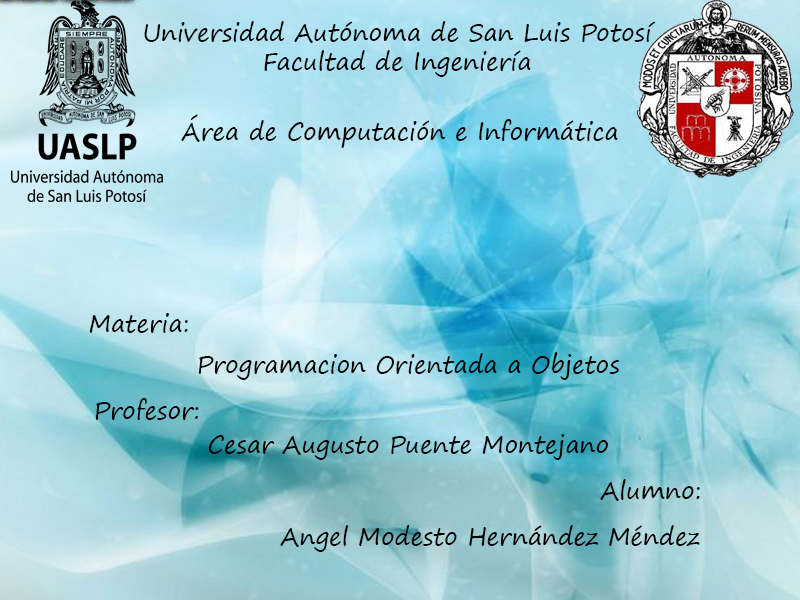
<style>
.page{position:relative;width:800px;height:600px}
.page>*{position:absolute;margin:0}
.t1{font:24px "SegoePrint";color:#000000}
</style>
<div class="page">
<p class="t1" style="left:144px;top:21px;width:511px;height:56px;text-align:center">Universidad Autónoma de San Luis Potosí<br>Facultad de Ingeniería</p>
<p class="t1" style="left:181px;top:114px;width:437px;height:34px">Área de Computación e Informática</p>
<p class="t1" style="left:89px;top:313px;width:99px;height:20px">Materia:</p>
<p class="t1" style="left:198px;top:352px;width:421px;height:28px">Programacion Orientada a Objetos</p>
<p class="t1" style="left:95px;top:398px;width:104px;height:22px">Profesor:</p>
<p class="t1" style="left:208px;top:434px;width:400px;height:26px">Cesar Augusto Puente Montejano</p>
<p class="t1" style="left:600px;top:479px;width:100px;height:22px">Alumno:</p>
<p class="t1" style="left:280px;top:525px;width:420px;height:27px">Angel Modesto Hernández Méndez</p>
</div>
